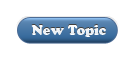
<style>
.page{position:relative;width:137px;height:63px;background:#ffffff}
.page>*{position:absolute;margin:0}
.t1{font:13px "CooperBlackStd";color:#ebf1f5}
</style>
<div class="page">
<p class="t1" style="left:31px;top:24px;width:75px;height:12px">New Topic</p>
</div>
